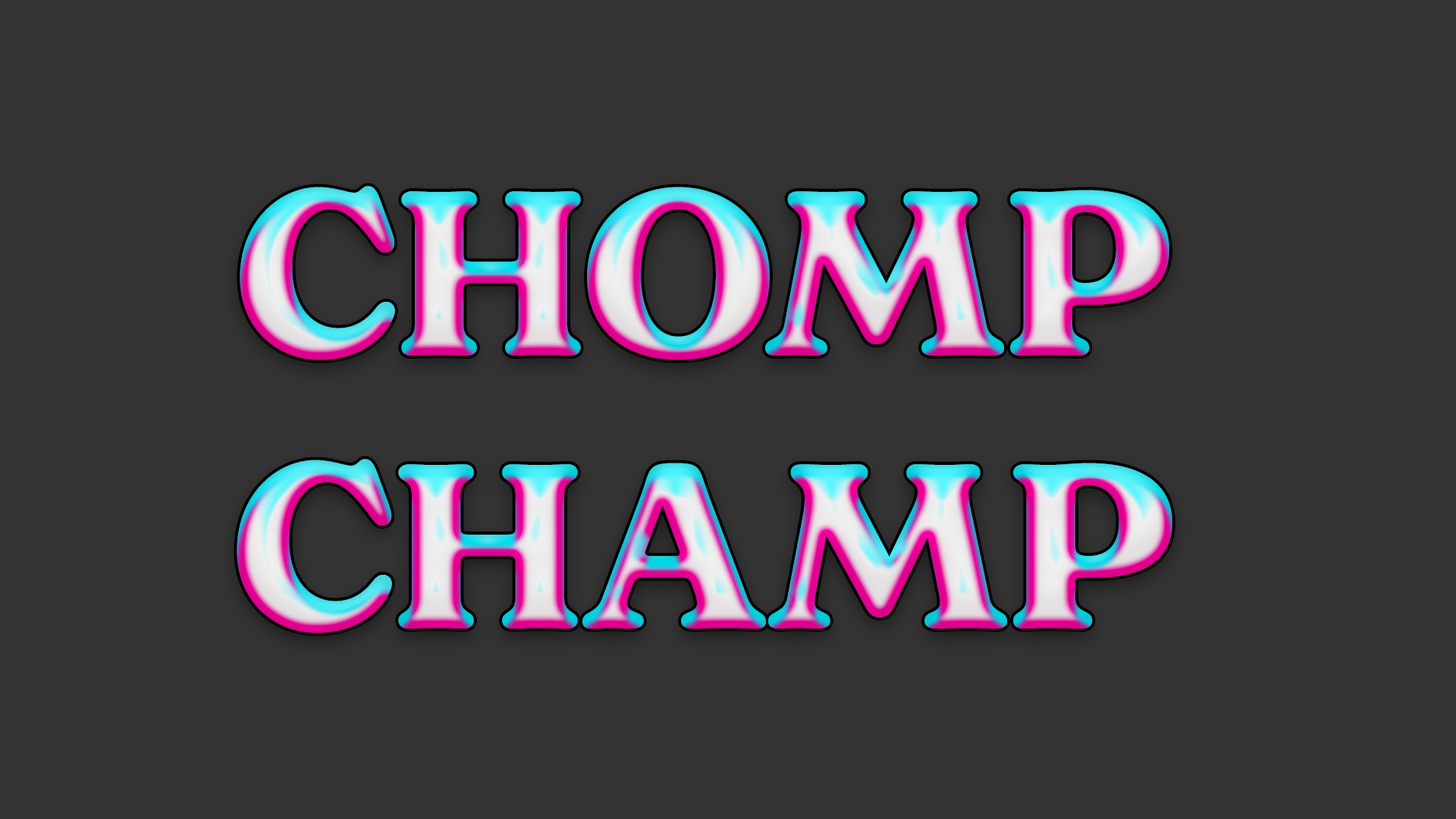
<style>
.page{position:relative;width:1456px;height:819px;background:#333333}
.page>*{position:absolute;margin:0}
.t1{font:227.5px "NewSpirit-Bold"}
</style>
<div class="page">
<p class="t1" style="left:237px;top:186px;width:935px;height:447px;text-align:center">CHOMP<br>CHAMP</p>
<p class="t1" style="left:237px;top:186px;width:935px;height:447px;text-align:center">CHOMP<br>CHAMP</p>
</div>
